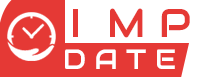
<style>
.page{position:relative;width:200px;height:77px;background:#e53935}
.page>*{position:absolute;margin:0}
.t1{font:40px "Audiowide-Regular";color:#e53935;text-transform:uppercase}
.t2{font:28px "Audiowide-Regular";letter-spacing:0.3em;color:#ffffff;text-transform:uppercase}
</style>
<div class="page">
<p class="t1" style="left:110px;top:8px;width:33px;height:30px">M</p>
<p class="t1" style="left:161px;top:9px;width:29px;height:28px">P</p>
<p class="t2" style="left:65px;top:49px;width:110px;height:20px">Date</p>
</div>
